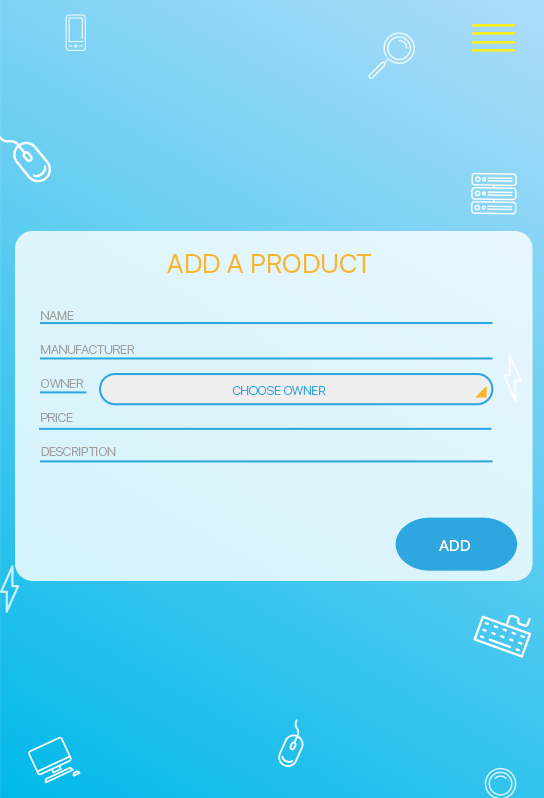
<style>
.page{position:relative;width:544px;height:798px}
.page>*{position:absolute;margin:0}
.t1{font:26.8px "SFUIDisplay-Regular";color:#f8b62d;text-transform:uppercase}
.t2{font:12.6px/34px "SFUIDisplay-Light";color:#9fa0a0;text-transform:uppercase}
.t3{font:12.4px "SFUIDisplay-Light";color:#2ea7e0;text-transform:uppercase}
.t4{font:16.2px "SFUIDisplay-Regular";color:#ffffff;text-transform:uppercase}
</style>
<div class="page">
<p class="t1" style="left:167px;top:254px;width:204px;height:19px">Add a product</p>
<p class="t2" style="left:41px;top:311px;width:94px;height:145px">Name <br>Manufacturer <br>Owner <br>Price <br>Description</p>
<p class="t3" style="left:232px;top:386px;width:94px;height:9px">choose Owner</p>
<p class="t4" style="left:439px;top:540px;width:31px;height:11px">add</p>
</div>
